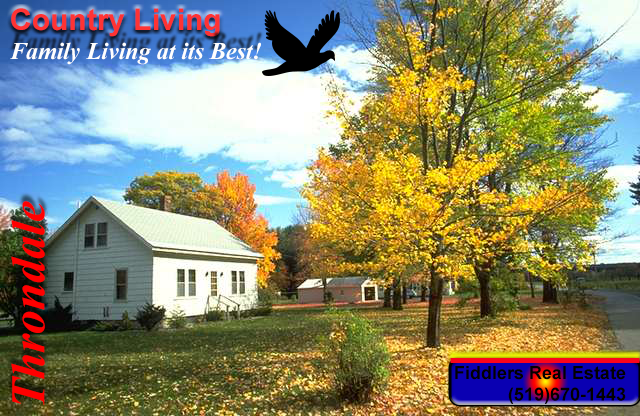
<style>
.page{position:relative;width:640px;height:416px}
.page>*{position:absolute;margin:0}
.t1{font:30px "Arial-BoldMT";color:#ff3333}
.t2{font:24px "TimesNewRomanPS-BoldItalicMT";color:#fefefe}
.t3{font:48px "TimesNewRomanPS-BoldItalicMT";color:#ff0000}
.t4{font:18px "Arial-BoldMT";color:#030000}
</style>
<div class="page">
<p class="t1" style="left:11px;top:8px;width:209px;height:29px">Country Living</p>
<p class="t2" style="left:10px;top:42px;width:251px;height:23px">Family Living at its Best!</p>
<p class="t3" style="left:11px;top:201px;width:34px;height:205px;rotate:-90deg">Throndale</p>
<p class="t4" style="left:455px;top:366px;width:171px;height:38px;text-align:right">Fiddlers Real Estate<br>(519)670-1443</p>
</div>
